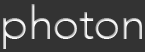
<style>
.page{position:relative;width:145px;height:52px;background:#333333}
.page>*{position:absolute;margin:0}
.t1{font:46px "AvenirLT-Light"}
</style>
<div class="page">
<p class="t1" style="left:3px;top:4px;width:139px;height:45px">photon</p>
</div>
